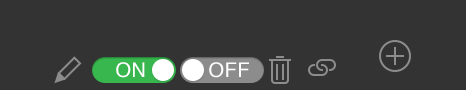
<style>
.page{position:relative;width:466px;height:90px;background:#333333}
.page>*{position:absolute;margin:0}
.t1{font:20px "Helvetica";letter-spacing:0.025em;color:#ffffff}
</style>
<div class="page">
<p class="t1" style="left:116px;top:62px;width:29px;height:16px">ON</p>
<p class="t1" style="left:209px;top:62px;width:40px;height:16px">OFF</p>
</div>
